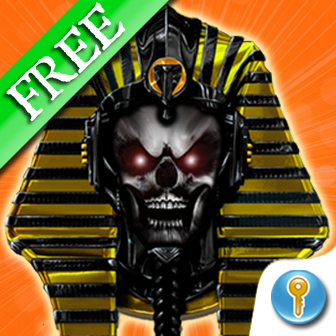
<style>
.page{position:relative;width:336px;height:336px}
.page>*{position:absolute;margin:0}
.t1{font:60px "JSL-Ancient";color:#ffffff}
</style>
<div class="page">
<p class="t1" style="left:6px;top:2px;width:120px;height:120px;rotate:-45deg">FREE</p>
</div>
